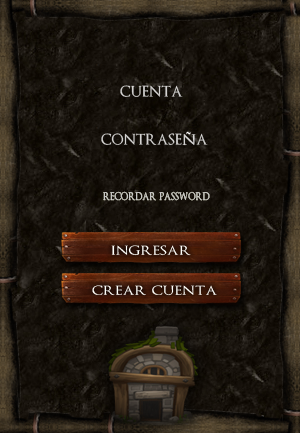
<style>
.page{position:relative;width:300px;height:433px}
.page>*{position:absolute;margin:0}
.t1{font:19.5px "OptimusPrinceps";color:#d3d2d1}
.t2{font:19.5px "OptimusPrincepsSemiBold";color:#d3d2d1}
.t3{font:13.9px "OptimusPrinceps";color:#cfcfcf;scale:0.85 1}
.t4{font:16.4px "OptimusPrinceps";color:#fffffb;scale:1.24 1}
</style>
<div class="page">
<p class="t1" style="left:120px;top:85px;width:63px;height:12px">cuenta</p>
<p class="t1" style="left:101px;top:133px;width:107px;height:13px">contrase<span class="t2">n</span>a</p>
<p class="t3" style="left:103px;top:191px;width:107px;height:10px">recordar password</p>
<p class="t4" style="left:111px;top:245px;width:80px;height:11px">ingresar</p>
<p class="t4" style="left:92px;top:285px;width:125px;height:11px">crear cuenta</p>
</div>
